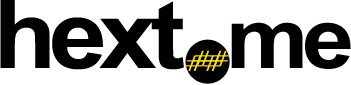
<style>
.page{position:relative;width:351px;height:85px;background:#ffffff}
.page>*{position:absolute;margin:0}
.t1{font:95px "Arial-BoldMT";letter-spacing:-0.075em;color:#000000;scale:1.1 1}
.t2{font:85px "Arial-BoldMT";letter-spacing:-0.075em;color:#000000;scale:1.1 1}
.t3{font:21px "LucidaBright";letter-spacing:-0.05em;color:#fbdd14;scale:1.5 1}
</style>
<div class="page">
<p class="t1" style="left:0px;top:0px;width:351px;height:70px">hext   <span class="t2">me</span></p>
<p class="t3" style="left:193px;top:50px;width:37px;height:16px">##</p>
<p class="t3" style="left:185px;top:55px;width:38px;height:16px">##</p>
</div>
